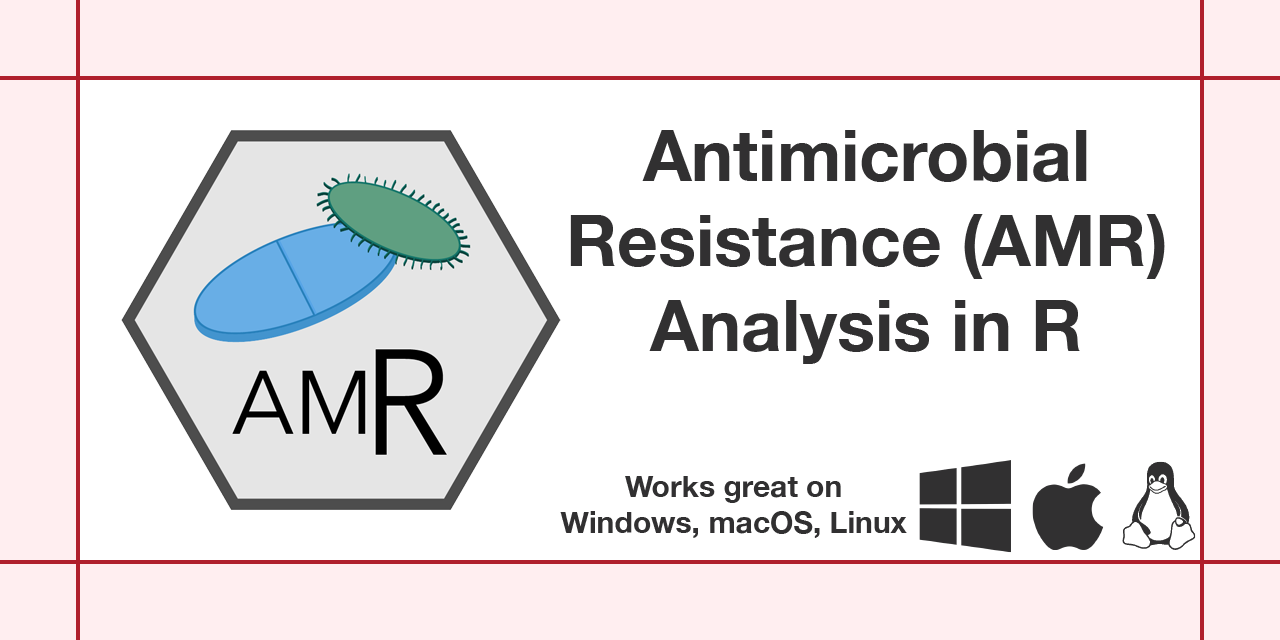
<style>
.page{position:relative;width:1280px;height:640px;background:#ffffff}
.page>*{position:absolute;margin:0}
.t1{font:71px "HelveticaNeue-Bold";color:#313031}
.t2{font:30px "HelveticaNeue-Bold";color:#313031}
</style>
<div class="page">
<p class="t1" style="left:570px;top:130px;width:595px;height:234px;text-align:center">Antimicrobial<br>Resistance (AMR)<br>Analysis in R</p>
<p class="t2" style="left:560px;top:476px;width:347px;height:62px;text-align:center">Works great on<br>Windows, macOS, Linux</p>
</div>
